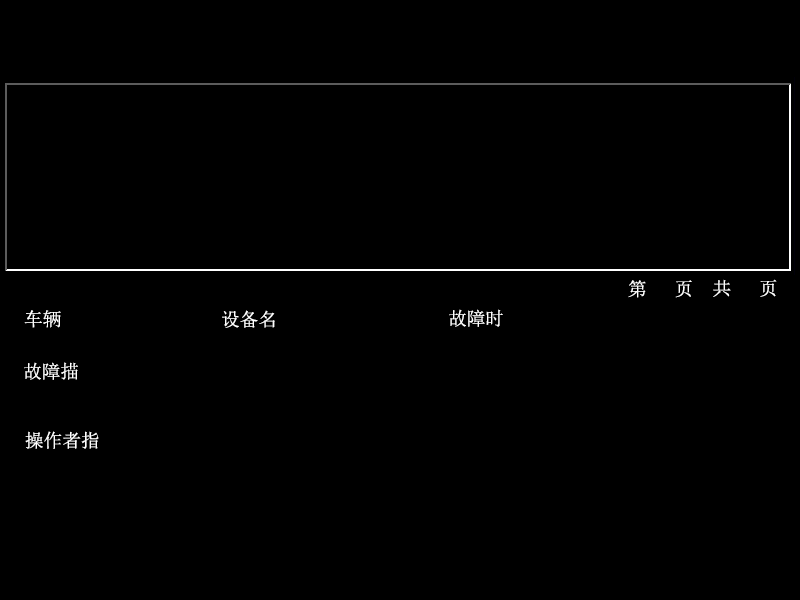
<style>
.page{position:relative;width:800px;height:600px;background:#000000}
.page>*{position:absolute;margin:0}
.t1{font:18.7px "SimSun";color:#ffffff}
</style>
<div class="page">
<p class="t1" style="left:628px;top:280px;width:64px;height:18px">第   页</p>
<p class="t1" style="left:713px;top:279px;width:64px;height:18px">共   页</p>
<p class="t1" style="left:24px;top:310px;width:37px;height:18px">车辆</p>
<p class="t1" style="left:222px;top:310px;width:53px;height:18px">设备名</p>
<p class="t1" style="left:449px;top:309px;width:54px;height:18px">故障时</p>
<p class="t1" style="left:24px;top:362px;width:54px;height:18px">故障描</p>
<p class="t1" style="left:25px;top:431px;width:74px;height:18px">操作者指</p>
</div>
